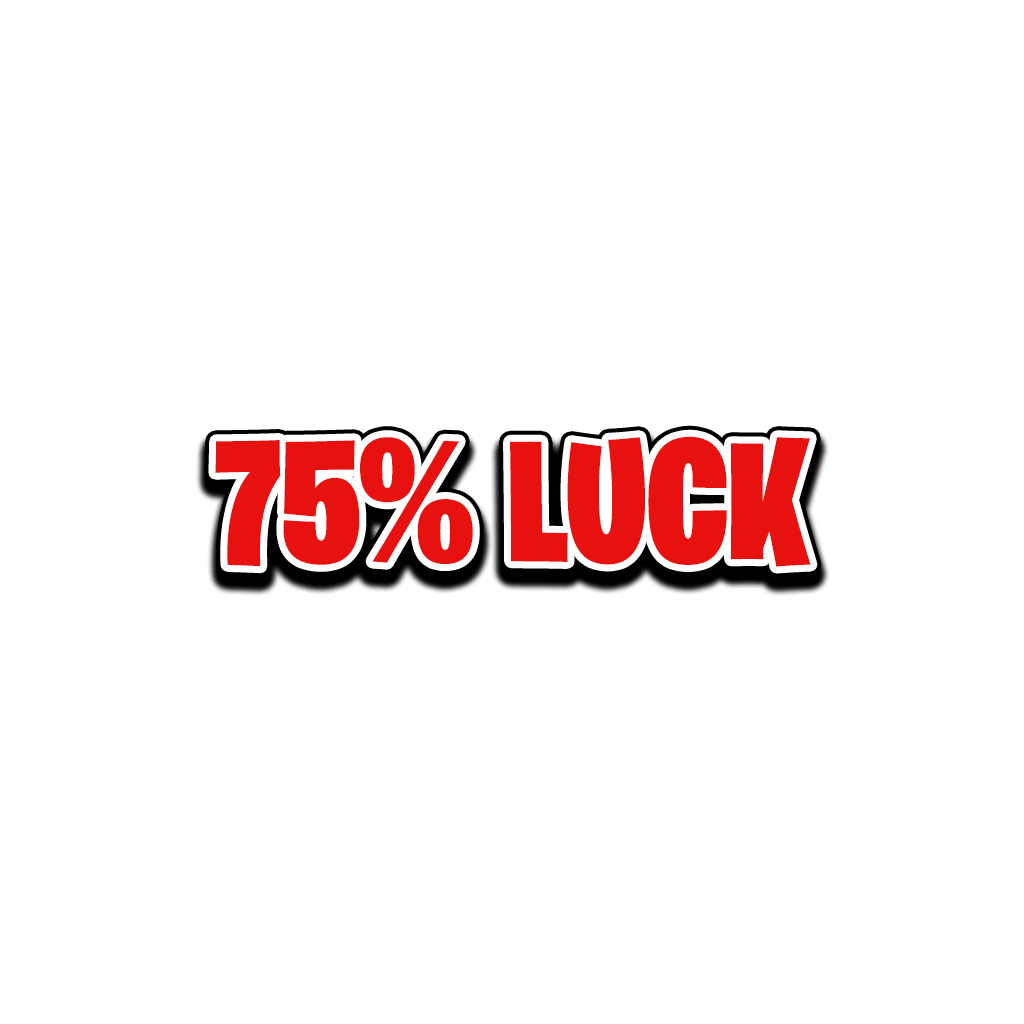
<style>
.page{position:relative;width:1024px;height:1024px;background:#ffffff}
.page>*{position:absolute;margin:0}
.t1{font:174.2px "BurbankBigCondensed-Black";color:#e7120f}
</style>
<div class="page">
<p class="t1" style="left:215px;top:436px;width:596px;height:131px">75% LUCK</p>
</div>
